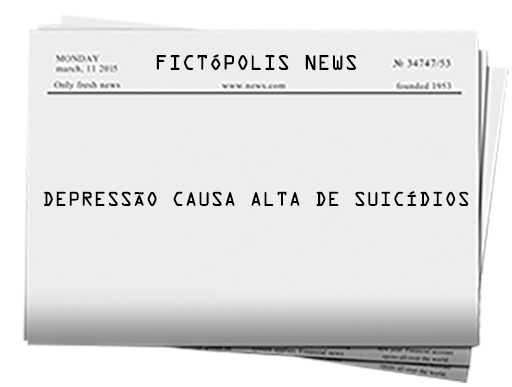
<style>
.page{position:relative;width:512px;height:387px;background:#ededed}
.page>*{position:absolute;margin:0}
.t1{font:18.8px "OCRAStd";color:#000000}
.t2{font:18px "OCRAStd";color:#000000}
</style>
<div class="page">
<p class="t1" style="left:156px;top:54px;width:200px;height:16px">FICTÓPOLIS NEWS</p>
<p class="t2" style="left:43px;top:191px;width:426px;height:15px">DEPRESSÃO CAUSA ALTA DE SUICÍDIOS</p>
</div>
